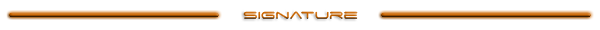
<style>
.page{position:relative;width:600px;height:30px;background:#ffffff}
.page>*{position:absolute;margin:0}
.t1{font:16px "SpaceAge"}
</style>
<div class="page">
<p class="t1" style="left:243px;top:11px;width:115px;height:8px">signature</p>
</div>
